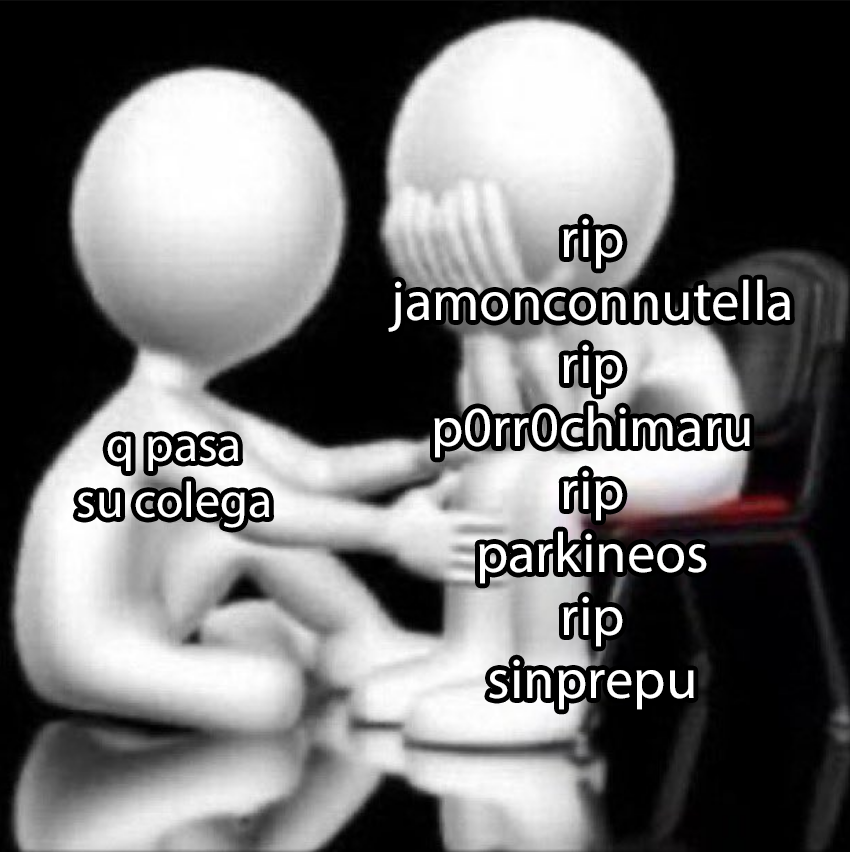
<style>
.page{position:relative;width:850px;height:852px;background:#000000}
.page>*{position:absolute;margin:0}
.t1{font:56.8px "MyriadPro-Regular";color:#ffffff}
.t2{font:50px "MyriadPro-Regular";color:#ffffff}
</style>
<div class="page">
<p class="t1" style="left:388px;top:218px;width:402px;height:492px;text-align:center">rip<br>jamonconnutella<br>rip<br>p0rr0chimaru<br>rip<br>parkineos<br>rip<br>sinprepu</p>
<p class="t2" style="left:77px;top:436px;width:193px;height:92px;text-align:center">q pasa<br>su colega</p>
</div>
